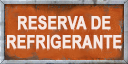
<style>
.page{position:relative;width:128px;height:64px}
.page>*{position:absolute;margin:0}
.t1{font:18px/19.2px "Arial-BoldMT";color:#f6e9e3;font-weight:bold;scale:0.79 1}
</style>
<div class="page">
<p class="t1" style="left:7px;top:15px;width:115px;height:34px;text-align:center">RESERVA DE<br>REFRIGERANTE</p>
</div>
